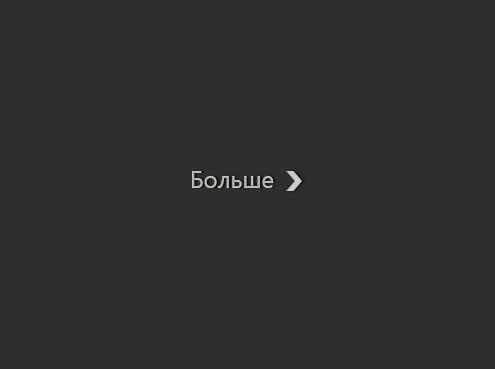
<style>
.page{position:relative;width:495px;height:369px;background:#2e2e2e}
.page>*{position:absolute;margin:0}
.t1{font:24px "SegoeUI";color:#bbbbb2}
</style>
<div class="page">
<p class="t1" style="left:192px;top:171px;width:82px;height:17px">Больше</p>
</div>
